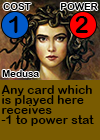
<style>
.page{position:relative;width:100px;height:140px;background:#795b01}
.page>*{position:absolute;margin:0}
.t1{font:9.7px "ArialRoundedMTBold";letter-spacing:0.01em;color:#000000}
.t2{font:24px "ArialRoundedMTBold";letter-spacing:0.01em;color:#000000}
.t3{font:24px "ArialRoundedMTBold";letter-spacing:-0.1em;color:#000000}
.t4{font:12px/10px "ArialRoundedMTBold";letter-spacing:0.01em;color:#000000}
</style>
<div class="page">
<p class="t1" style="left:3px;top:3px;width:28px;height:7px">COST</p>
<p class="t1" style="left:60px;top:3px;width:38px;height:7px">POWER</p>
<p class="t2" style="left:9px;top:16px;width:9px;height:17px">1</p>
<p class="t3" style="left:75px;top:16px;width:13px;height:17px">2</p>
<p class="t1" style="left:2px;top:70px;width:37px;height:7px">Medusa</p>
<p class="t4" style="left:1px;top:85px;width:93px;height:41px">Any card which <br>is played here<br>receives <br>-1 to power stat</p>
</div>
